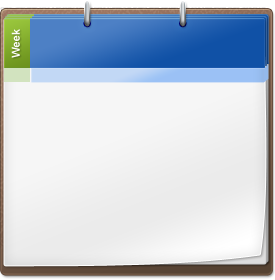
<style>
.page{position:relative;width:275px;height:280px}
.page>*{position:absolute;margin:0}
.t1{font:11px "Arial-BoldMT";color:#fcfcfa}
</style>
<div class="page">
<p class="t1" style="left:11px;top:29px;width:9px;height:29px;rotate:-90deg">Week</p>
</div>
